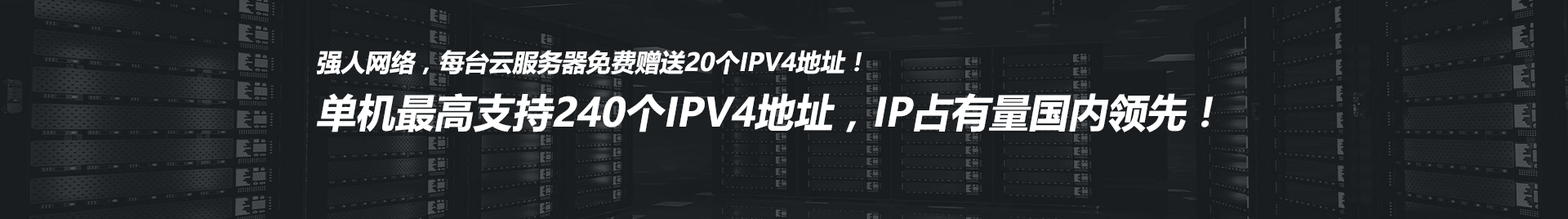
<style>
.page{position:relative;width:1568px;height:219px}
.page>*{position:absolute;margin:0}
.t1{font:39.2px "MicrosoftYaHei-Bold";color:#ffffff;font-style:italic}
.t2{font:24.5px "MicrosoftYaHei-Bold";color:#ffffff;font-style:italic}
</style>
<div class="page">
<p class="t1" style="left:316px;top:50px;width:898px;height:82px"><span class="t2">强人网络，每台云服务器免费赠送20个IPV4地址！<br></span>单机最高支持240个IPV4地址，IP占有量国内领先！</p>
</div>
